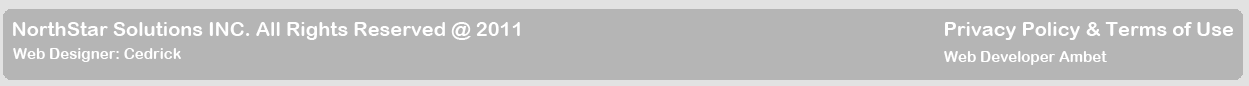
<style>
.page{position:relative;width:1249px;height:86px;background:#b5b5b5}
.page>*{position:absolute;margin:0}
.t1{font:20px "ArialRoundedMTBold";color:#ffffff}
.t2{font:15px "ArialRoundedMTBold";color:#ffffff}
</style>
<div class="page">
<p class="t1" style="left:13px;top:22px;width:1220px;height:18px">NorthStar Solutions INC. All Rights Reserved @ 2011                                                                                    Privacy Policy &amp; Terms of Use</p>
<p class="t2" style="left:13px;top:48px;width:168px;height:14px">Web Designer: Cedrick</p>
<p class="t2" style="left:944px;top:51px;width:163px;height:14px">Web Developer Ambet</p>
</div>
